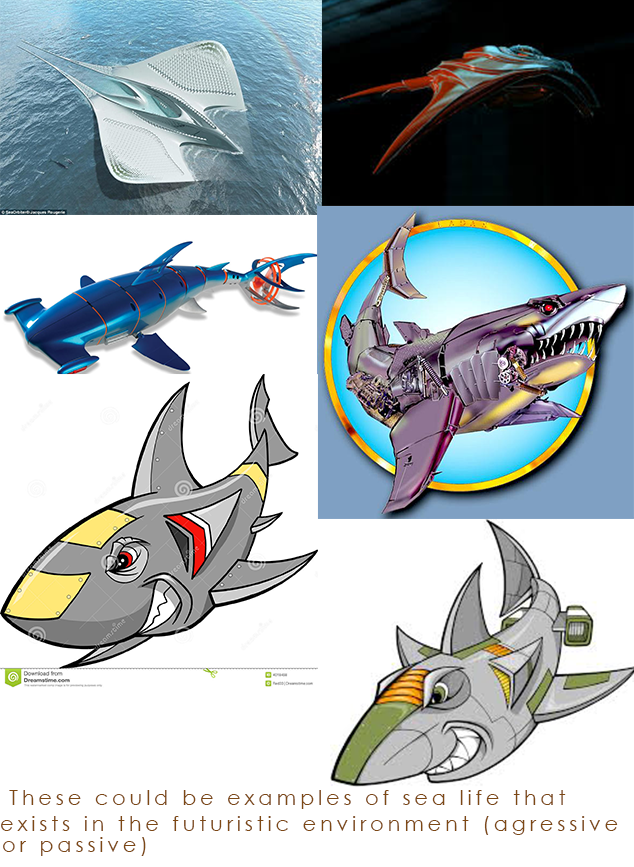
<style>
.page{position:relative;width:634px;height:867px;background:#ffffff}
.page>*{position:absolute;margin:0}
.t1{font:21px "CenturyGothic";letter-spacing:0.18em;color:#7d4814}
</style>
<div class="page">
<p class="t1" style="left:9px;top:790px;width:557px;height:19px">These could be examples of sea life that</p>
<p class="t1" style="left:1px;top:816px;width:617px;height:19px">exists in the futuristic environment (agressive</p>
<p class="t1" style="left:3px;top:837px;width:143px;height:19px">or passive)</p>
</div>
